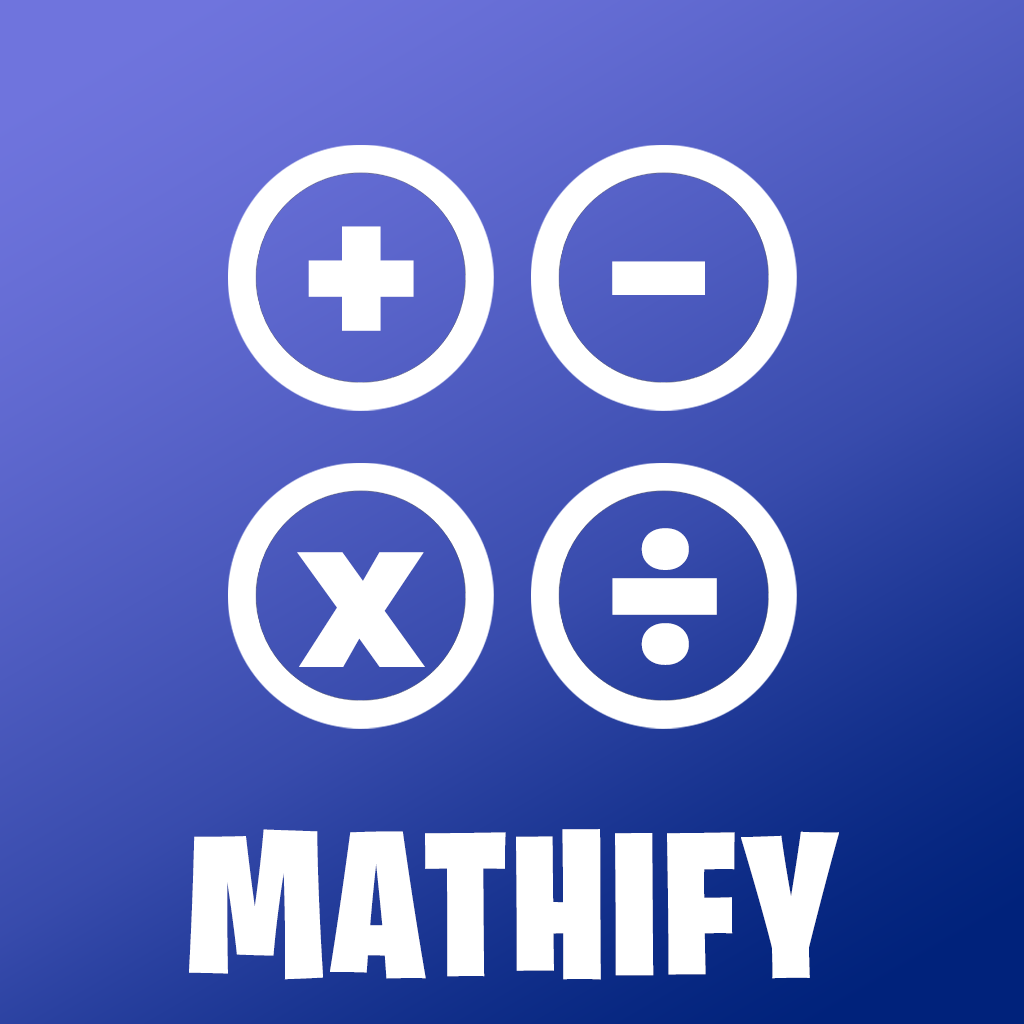
<style>
.page{position:relative;width:1024px;height:1024px}
.page>*{position:absolute;margin:0}
.t1{font:204.2px "Poppins-ExtraBold";letter-spacing:0.025em;color:#ffffff}
.t2{font:204.2px "BurbankBigCondensed-Black";letter-spacing:0.025em;color:#ffffff}
</style>
<div class="page">
<p class="t1" style="left:308px;top:226px;width:106px;height:105px">+</p>
<p class="t1" style="left:612px;top:261px;width:93px;height:34px">-</p>
<p class="t1" style="left:612px;top:528px;width:105px;height:137px">÷</p>
<p class="t1" style="left:297px;top:552px;width:128px;height:115px">x</p>
<p class="t2" style="left:189px;top:829px;width:650px;height:151px">MATHIFY</p>
</div>
